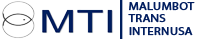
<style>
.page{position:relative;width:200px;height:39px;background:#ffffff}
.page>*{position:absolute;margin:0}
.t1{font:10.5px "MyriadPro-Regular";color:#031f60;font-weight:bold;scale:1.2 1}
</style>
<div class="page">
<p class="t1" style="left:128px;top:2px;width:67px;height:34px">MALUMBOT <br>TRANS <br>INTERNUSA</p>
</div>
